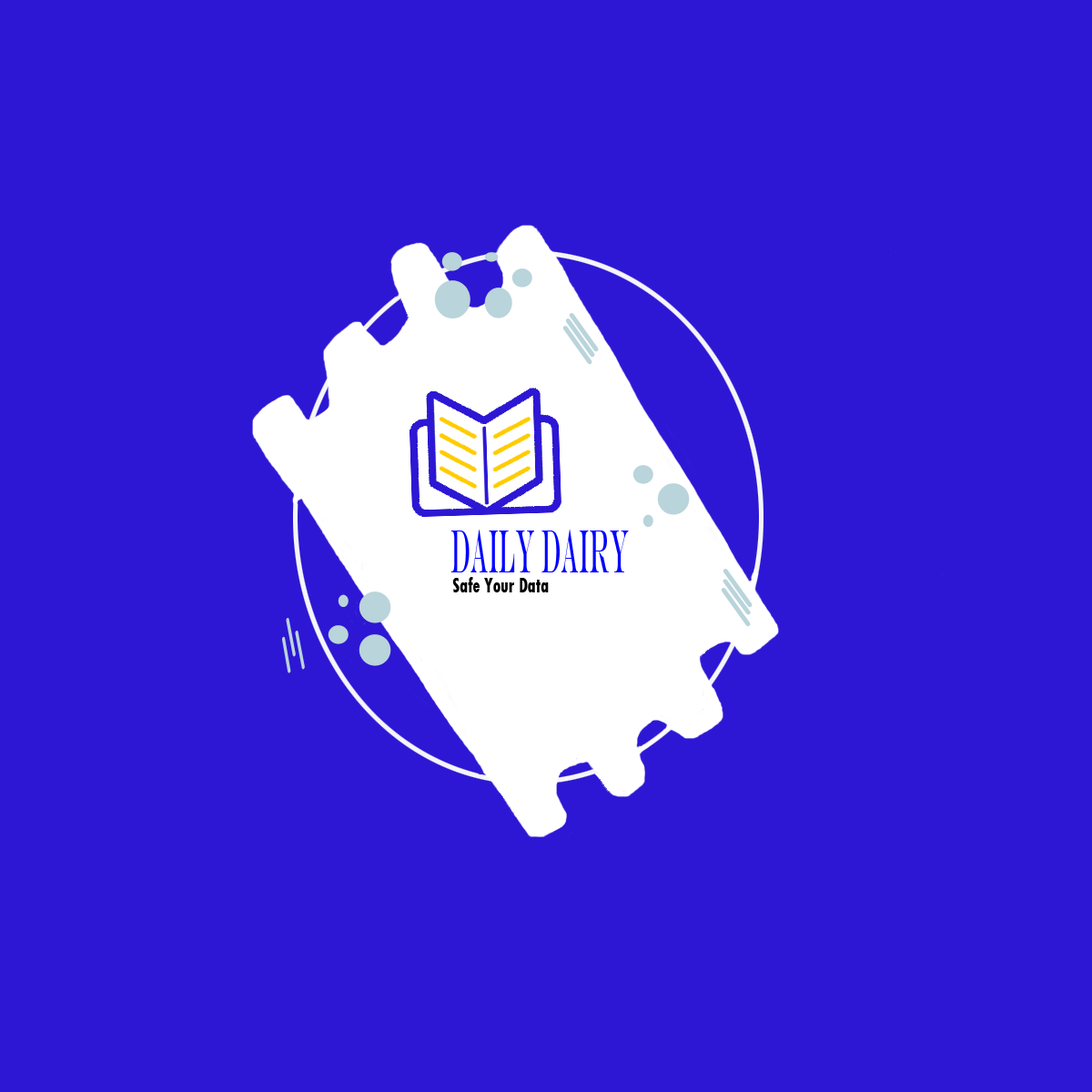
<style>
.page{position:relative;width:1092px;height:1092px;background:#2d17d4}
.page>*{position:absolute;margin:0}
.t1{font:61.5px "EngraversMT";color:#0000ff;scale:0.32 1}
.t2{font:22px "TwCenMT-CondensedExtraBold";color:#000000;scale:0.78 1}
</style>
<div class="page">
<p class="t1" style="left:451px;top:530px;width:178px;height:42px">DAILY DAIRY</p>
<p class="t2" style="left:452px;top:577px;width:97px;height:15px">Safe Your Data</p>
</div>
